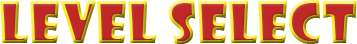
<style>
.page{position:relative;width:357px;height:44px;background:#ffffff}
.page>*{position:absolute;margin:0}
.t1{font:56px "ShowcardGothic-Reg"}
</style>
<div class="page">
<p class="t1" style="left:0px;top:0px;width:357px;height:44px">Level Select</p>
</div>
